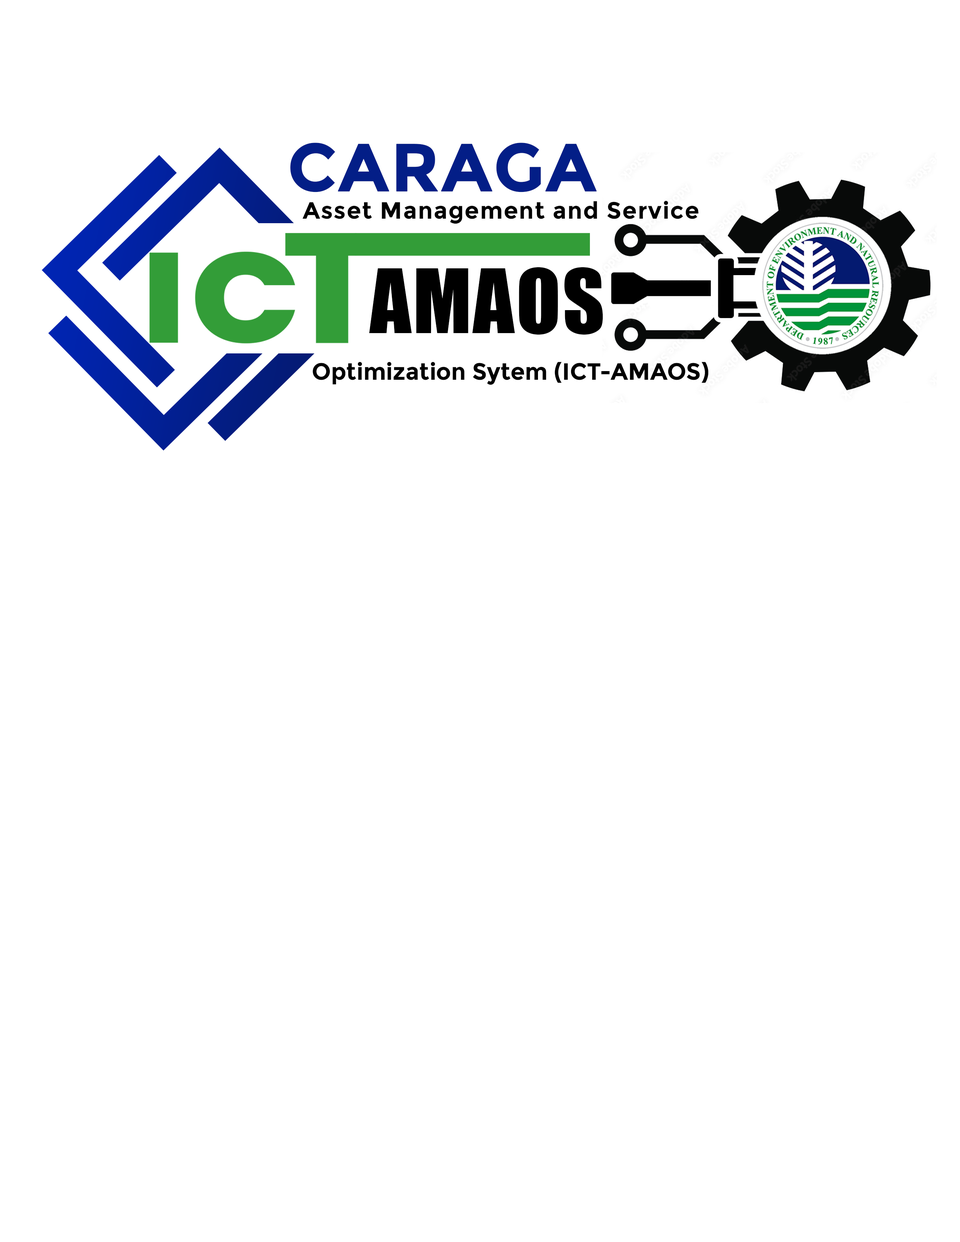
<style>
.page{position:relative;width:960px;height:1242px;background:#ffffff}
.page>*{position:absolute;margin:0}
.t1{font:67.4px "Montserrat-Bold";color:#031e87;font-weight:bold}
.t2{font:23.6px "Montserrat-Bold";letter-spacing:0.04em;color:#000000}
.t3{font:81.7px "Impact";letter-spacing:0.02em;color:#000000}
.t4{font:23.6px "Montserrat-Bold";color:#000000}
</style>
<div class="page">
<p class="t1" style="left:290px;top:143px;width:307px;height:49px">CARAGA</p>
<p class="t2" style="left:302px;top:201px;width:396px;height:23px">Asset Management and Service</p>
<p class="t3" style="left:369px;top:267px;width:234px;height:68px">AMAOS</p>
<p class="t4" style="left:312px;top:362px;width:396px;height:23px">Optimization Sytem (ICT-AMAOS)</p>
</div>
